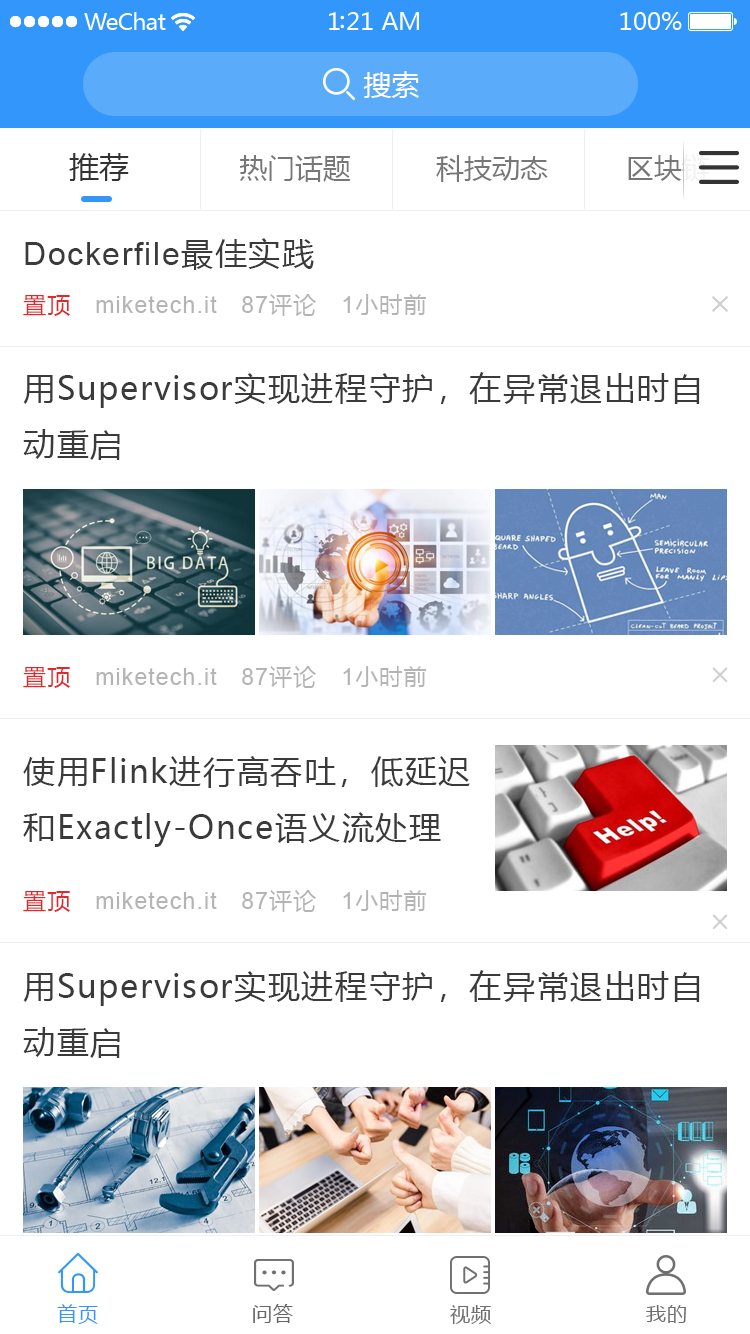
<style>
.page{position:relative;width:750px;height:1334px;background:#ffffff}
.page>*{position:absolute;margin:0}
.t1{font:28px "MicrosoftYaHei";color:#ffffff}
.t2{font:30px "MicrosoftYaHei";color:#333333}
.t3{font:28px "MicrosoftYaHei";color:#777777}
.t4{font:32px "ArialMT";letter-spacing:0.05em;color:#3a3a3a}
.t5{font:32px "MicrosoftYaHei";letter-spacing:0.05em;color:#3a3a3a}
.t6{font:23px "ArialMT";letter-spacing:0.05em;color:#b4b4b4}
.t7{font:23px "MicrosoftYaHei";letter-spacing:0.05em;color:#e22829}
.t8{font:23px "MicrosoftYaHei";letter-spacing:0.05em;color:#b4b4b4}
.t9{font:20px "MicrosoftYaHei";letter-spacing:0.05em;color:#3296fa}
.t10{font:20px "MicrosoftYaHei";letter-spacing:0.05em;color:#666666}
.t11{font:20px "MicrosoftYaHei";letter-spacing:0.05em;color:#707070}
.t12{font:20px "MicrosoftYaHei";letter-spacing:0.05em;color:#6e6e6e}
</style>
<div class="page">
<p class="t1" style="left:363px;top:71px;width:56px;height:27px">搜索</p>
<p class="t2" style="left:69px;top:153px;width:60px;height:28px">推荐</p>
<p class="t3" style="left:239px;top:155px;width:112px;height:27px">热门话题</p>
<p class="t3" style="left:436px;top:155px;width:112px;height:27px">科技动态</p>
<p class="t3" style="left:628px;top:154px;width:82px;height:28px">区块链</p>
<p class="t4" style="left:25px;top:238px;width:289px;height:32px">Dockerfile<span class="t5">最佳实践</span></p>
<p class="t6" style="left:23px;top:294px;width:403px;height:22px"><span class="t7">置顶   </span>miketech.it   87<span class="t8">评论   </span>1<span class="t8">小时前</span></p>
<p class="t5" style="left:23px;top:372px;width:677px;height:88px">用Supervisor实现进程守护，在异常退出时自<br>动重启</p>
<p class="t6" style="left:23px;top:666px;width:403px;height:22px"><span class="t7">置顶   </span>miketech.it   87<span class="t8">评论   </span>1<span class="t8">小时前</span></p>
<p class="t5" style="left:23px;top:756px;width:447px;height:91px">使用Flink进行高吞吐，低延迟<br>和Exactly-Once语义流处理</p>
<p class="t6" style="left:23px;top:890px;width:403px;height:22px"><span class="t7">置顶   </span>miketech.it   87<span class="t8">评论   </span>1<span class="t8">小时前</span></p>
<p class="t5" style="left:23px;top:970px;width:677px;height:88px">用Supervisor实现进程守护，在异常退出时自<br>动重启</p>
<p class="t9" style="left:57px;top:1304px;width:41px;height:20px">首页</p>
<p class="t10" style="left:253px;top:1304px;width:40px;height:19px">问答</p>
<p class="t11" style="left:450px;top:1305px;width:41px;height:19px">视频</p>
<p class="t12" style="left:646px;top:1305px;width:40px;height:18px">我的</p>
</div>
